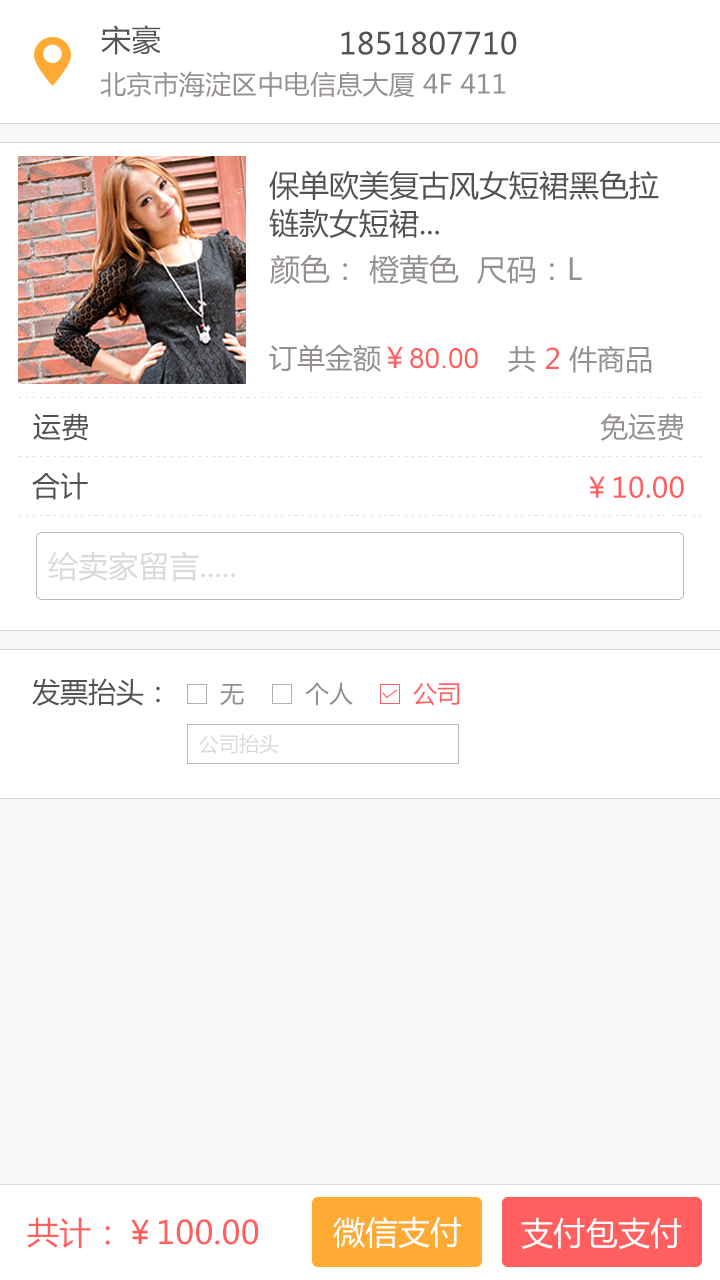
<style>
.page{position:relative;width:720px;height:1280px;background:#ffffff}
.page>*{position:absolute;margin:0}
.t1{font:30px "MicrosoftYaHei";letter-spacing:0.01em;color:#525252}
.t2{font:26px "MicrosoftYaHei";letter-spacing:0.01em;color:#958f93}
.t3{font:30px/38px "MicrosoftYaHei";color:#525252}
.t4{font:30px "MicrosoftYaHei";color:#958f93}
.t5{font:28px "ArialMT";color:#ff5f5f}
.t6{font:28px "MicrosoftYaHei";color:#958f93}
.t7{font:28px "MicrosoftYaHei";color:#ff5f5f}
.t8{font:28px "MicrosoftYaHei";letter-spacing:0.01em;color:#525252}
.t9{font:28px "MicrosoftYaHei";letter-spacing:0.01em;color:#958f93}
.t10{font:28px "MicrosoftYaHei";letter-spacing:0.01em;color:#ff5f5f}
.t11{font:30px "MicrosoftYaHei";letter-spacing:0.01em;color:#dcd9da}
.t12{font:28px "MicrosoftYaHei";color:#525252}
.t13{font:24px "MicrosoftYaHei";color:#8f8e8f}
.t14{font:24px "MicrosoftYaHei";color:#ff5f5f}
.t15{font:20px "MicrosoftYaHei";color:#dcd9da}
.t16{font:32px "MicrosoftYaHei";letter-spacing:0.01em;color:#ff5f5f}
.t17{font:32px "MicrosoftYaHei";letter-spacing:0.01em;color:#ffffff}
</style>
<div class="page">
<p class="t1" style="left:101px;top:25px;width:60px;height:30px">宋豪</p>
<p class="t1" style="left:341px;top:31px;width:176px;height:24px">1851807710</p>
<p class="t2" style="left:100px;top:71px;width:406px;height:27px">北京市海淀区中电信息大厦 4F 411</p>
<p class="t3" style="left:269px;top:170px;width:390px;height:68px">保单欧美复古风女短裙黑色拉<br>链款女短裙...</p>
<p class="t4" style="left:270px;top:254px;width:312px;height:31px">颜色： 橙黄色  尺码：L</p>
<p class="t5" style="left:269px;top:344px;width:209px;height:28px"><span class="t6">订单金额</span><span class="t7">￥</span>80.00</p>
<p class="t6" style="left:508px;top:345px;width:144px;height:28px">共 <span class="t7">2 </span>件商品</p>
<p class="t8" style="left:33px;top:413px;width:55px;height:28px">运费</p>
<p class="t9" style="left:600px;top:413px;width:84px;height:28px">免运费</p>
<p class="t8" style="left:32px;top:472px;width:56px;height:28px">合计</p>
<p class="t10" style="left:589px;top:476px;width:95px;height:22px">￥10.00</p>
<p class="t11" style="left:48px;top:551px;width:187px;height:30px">给卖家留言.....</p>
<p class="t12" style="left:32px;top:678px;width:128px;height:28px">发票抬头：</p>
<p class="t13" style="left:220px;top:684px;width:24px;height:22px">无</p>
<p class="t13" style="left:305px;top:682px;width:48px;height:24px">个人</p>
<p class="t14" style="left:413px;top:682px;width:47px;height:24px">公司</p>
<p class="t15" style="left:199px;top:734px;width:80px;height:20px">公司抬头</p>
<p class="t16" style="left:27px;top:1217px;width:232px;height:32px">共计：￥100.00</p>
<p class="t17" style="left:333px;top:1216px;width:128px;height:32px">微信支付</p>
<p class="t17" style="left:521px;top:1217px;width:161px;height:32px">支付包支付</p>
</div>
